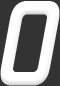
<style>
.page{position:relative;width:60px;height:86px;background:#333333}
.page>*{position:absolute;margin:0}
.t1{font:93.5px "Zekton-BoldItalic";color:#ffffff;text-transform:uppercase;font-weight:bold;scale:0.88 1}
</style>
<div class="page">
<p class="t1" style="left:0px;top:1px;width:60px;height:85px">0</p>
</div>
